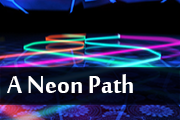
<style>
.page{position:relative;width:180px;height:120px}
.page>*{position:absolute;margin:0}
.t1{font:37.6px "MoolBoran";color:#ffffff;scale:0.96 1}
</style>
<div class="page">
<p class="t1" style="left:7px;top:74px;width:126px;height:19px">A Neon Path</p>
</div>
